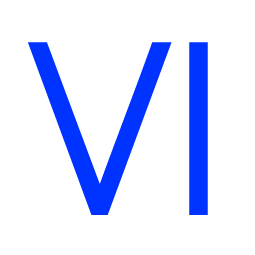
<style>
.page{position:relative;width:255px;height:255px;background:#ffffff}
.page>*{position:absolute;margin:0}
.t1{font:250px "CicleGordita";color:#0033ff}
</style>
<div class="page">
<p class="t1" style="left:28px;top:42px;width:180px;height:173px">VI</p>
</div>
